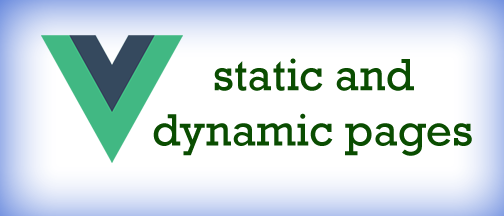
<style>
.page{position:relative;width:504px;height:216px;background:#ffffff}
.page>*{position:absolute;margin:0}
.t1{font:46px "Rockwell";color:#0a4d01}
</style>
<div class="page">
<p class="t1" style="left:153px;top:58px;width:319px;height:98px;text-align:center">static and <br>dynamic pages</p>
</div>
